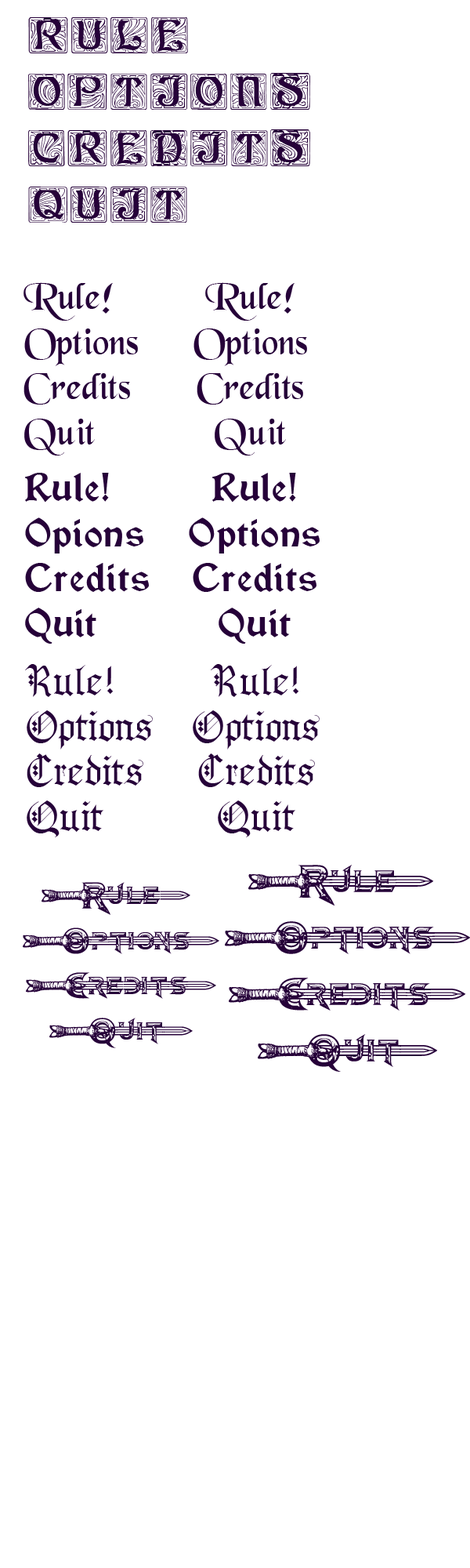
<style>
.page{position:relative;width:470px;height:1568px;background:#ffffff}
.page>*{position:absolute;margin:0}
.t1{font:47px "AnnStone";color:#260139}
.t2{font:37.6px "BlackChancery";color:#260139}
.t3{font:37.6px "Vinque-Regular";color:#260139}
.t4{font:37.6px "GothenburgFraktur";color:#260139}
.t5{font:47px "Barbarian";color:#260139}
.t6{font:37.6px "Barbarian";color:#260139}
</style>
<div class="page">
<p class="t1" style="left:28px;top:17px;width:282px;height:206px">Rule<br>Options<br>Credits<br>Quit</p>
<p class="t2" style="left:24px;top:282px;width:114px;height:174px">Rule!<br>Options<br>Credits<br>Quit</p>
<p class="t2" style="left:194px;top:282px;width:113px;height:174px;text-align:center">Rule!<br>Options<br>Credits<br>Quit</p>
<p class="t3" style="left:25px;top:473px;width:124px;height:171px">Rule!<br>Opions<br>Credits<br>Quit</p>
<p class="t3" style="left:189px;top:473px;width:131px;height:171px;text-align:center">Rule!<br>Options<br>Credits<br>Quit</p>
<p class="t4" style="left:25px;top:664px;width:128px;height:173px">Rule!<br>Options<br>Credits<br>Quit</p>
<p class="t4" style="left:193px;top:664px;width:127px;height:173px;text-align:center">Rule!<br>Options<br>Credits<br>Quit</p>
<p class="t5" style="left:225px;top:865px;width:246px;height:207px;text-align:center">Rule&gt;!<br>Options&gt;<br>Credits&gt;<br>Quit&gt;</p>
<p class="t6" style="left:23px;top:882px;width:197px;height:166px;text-align:center">Rule&gt;!<br>Options&gt;<br>Credits&gt;<br>Quit&gt;</p>
</div>
